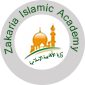
<style>
.page{position:relative;width:85px;height:85px;background:#ffffff}
.page>*{position:absolute;margin:0}
.t1{font:11px "Shruti";color:#006308}
.t2{font:6.5px "ArabicTypesetting";color:#006308}
</style>
<div class="page">
<p class="t1" style="left:3px;top:3px;width:76px;height:52px">Zakaria Islamic Academy</p>
<p class="t2" style="left:29px;top:51px;width:35px;height:14px;rotate:-2deg">زكريا الأكاديمية الإسلامية</p>
</div>
